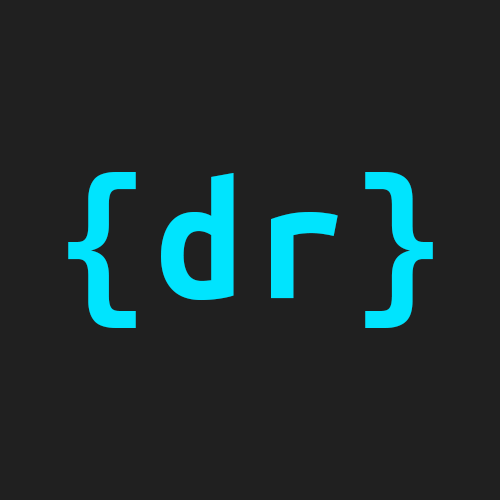
<style>
.page{position:relative;width:500px;height:500px;background:#202020}
.page>*{position:absolute;margin:0}
.t1{font:180px "UbuntuMono-Bold";letter-spacing:0.05em;color:#00e4fe}
</style>
<div class="page">
<p class="t1" style="left:68px;top:172px;width:365px;height:156px">{dr}</p>
</div>
